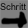
<style>
.page{position:relative;width:28px;height:28px;background:#808080}
.page>*{position:absolute;margin:0}
.t1{font:9.2px "ArialMT";color:#000000}
</style>
<div class="page">
<p class="t1" style="left:0px;top:3px;width:26px;height:7px">Schritt</p>
</div>
